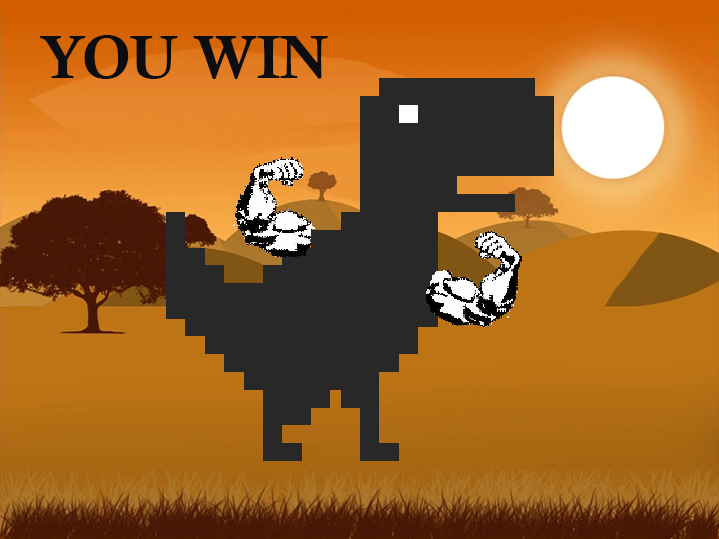
<style>
.page{position:relative;width:719px;height:539px}
.page>*{position:absolute;margin:0}
.t1{font:60px "CalisMTBol";color:#0b0d0e}
</style>
<div class="page">
<p class="t1" style="left:40px;top:35px;width:288px;height:44px">YOU WIN</p>
</div>
